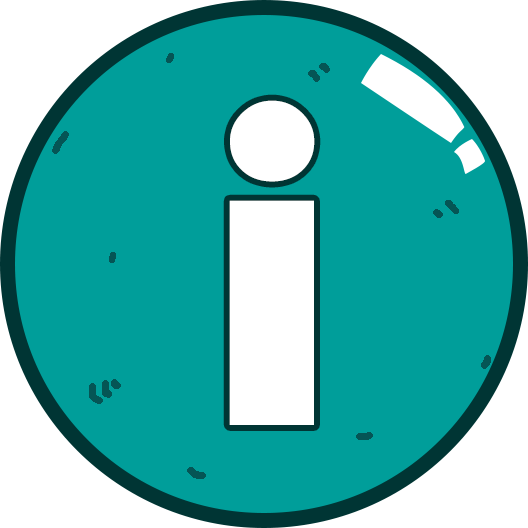
<style>
.page{position:relative;width:528px;height:528px;background:#009e9a}
.page>*{position:absolute;margin:0}
.t1{font:460px "Bauhaus93";color:#ffffff}
</style>
<div class="page">
<p class="t1" style="left:229px;top:100px;width:86px;height:325px">i</p>
</div>
